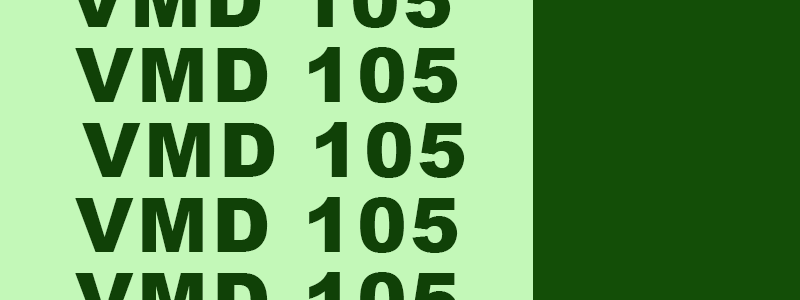
<style>
.page{position:relative;width:800px;height:300px;background:#c3f8b8}
.page>*{position:absolute;margin:0}
.t1{font:75px "Arial-Black";letter-spacing:0.05em;color:#104107}
</style>
<div class="page">
<p class="t1" style="left:75px;top:47px;width:383px;height:56px">VMD 105</p>
<p class="t1" style="left:82px;top:122px;width:383px;height:56px">VMD 105</p>
<p class="t1" style="left:75px;top:197px;width:383px;height:56px">VMD 105</p>
</div>
